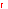
<style>
.page{position:relative;width:8px;height:9px;background:#ffffff}
.page>*{position:absolute;margin:0}
.t1{font:10px "Small Fonts";color:#ff0000}
</style>
<div class="page">
<p class="t1" style="left:1px;top:3px;width:2px;height:5px">r</p>
</div>
